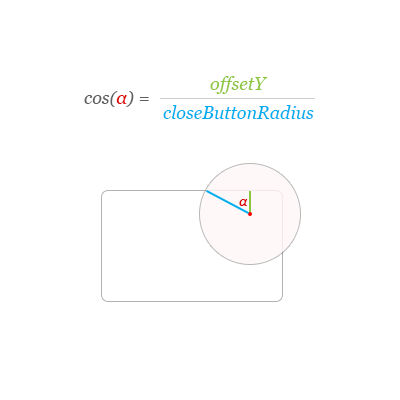
<style>
.page{position:relative;width:400px;height:400px;background:#ffffff}
.page>*{position:absolute;margin:0}
.t1{font:18px "Georgia-Italic";color:#8dc63f}
.t2{font:18px "Georgia-Italic";color:#5e5e5e}
.t3{font:18px "Georgia-Italic";color:#de0000}
.t4{font:18px "Georgia-Italic";color:#00aeef}
.t5{font:14px "Georgia-Italic";color:#de0000}
</style>
<div class="page">
<p class="t1" style="left:210px;top:76px;width:58px;height:18px">offsetY</p>
<p class="t2" style="left:84px;top:91px;width:65px;height:16px">cos(<span class="t3">α</span>) =</p>
<p class="t4" style="left:163px;top:105px;width:151px;height:14px">closeButtonRadius</p>
<p class="t5" style="left:239px;top:199px;width:9px;height:7px">α</p>
</div>
